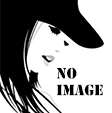
<style>
.page{position:relative;width:112px;height:113px;background:#ffffff}
.page>*{position:absolute;margin:0}
.t1{font:14px "StencilStd";color:#000000}
</style>
<div class="page">
<p class="t1" style="left:57px;top:67px;width:46px;height:29px">NO<br>IMAGE</p>
</div>
